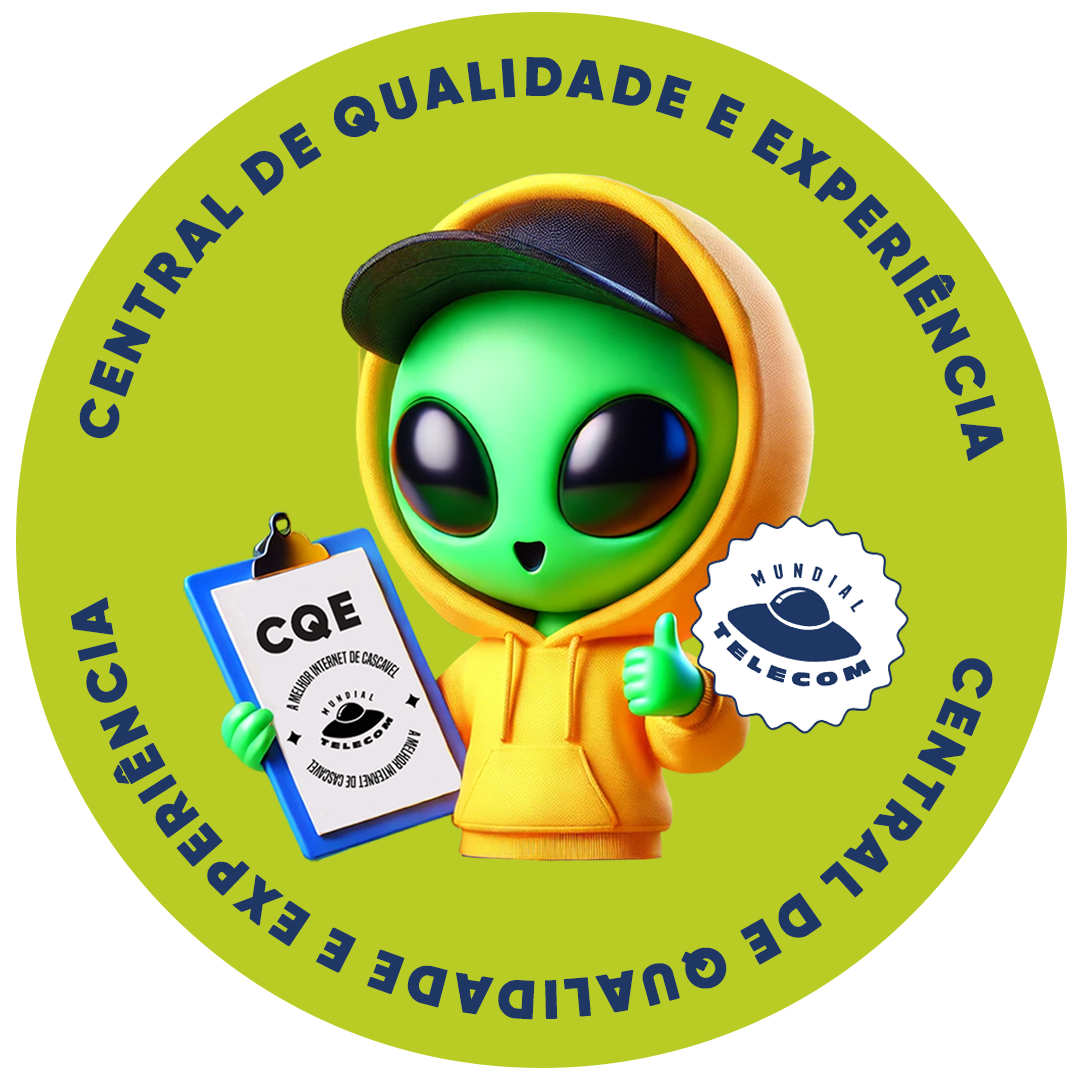
<style>
.page{position:relative;width:1080px;height:1080px;background:#b9cc25}
.page>*{position:absolute;margin:0}
.t1{font:54.2px "Gilroy-Black";letter-spacing:0.025em;color:#1e3764;font-weight:bold}
</style>
<div class="page">
<p class="t1" style="left:71px;top:57px;width:933px;height:963px;text-align:center">CENTRAL DE QUALIDADE E EXPERIÊNCIA         CENTRAL DE QUALIDADE E EXPERIÊNCIA</p>
</div>
